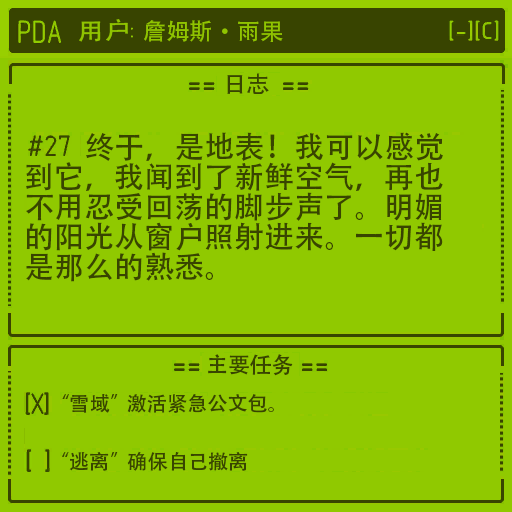
<style>
.page{position:relative;width:512px;height:512px;background:#90c900}
.page>*{position:absolute;margin:0}
.t1{font:23.4px "AdobeHeitiStd-Regular";color:#90c400;scale:1.15 1}
.t2{font:23.4px "AdobeHeitiStd-Regular";color:#90c400}
.t3{font:23.4px "AdobeHeitiStd-Regular";color:#384400}
.t4{font:30px/30px "AdobeHeitiStd-Regular";color:#384400}
.t5{font:21.8px "AdobeHeitiStd-Regular";color:#384400}
.t6{font:20.1px "AdobeHeitiStd-Regular";color:#384400}
</style>
<div class="page">
<p class="t1" style="left:79px;top:19px;width:49px;height:23px;rotate:-1deg">用户</p>
<p class="t2" style="left:144px;top:20px;width:139px;height:22px">詹姆斯·雨果</p>
<p class="t3" style="left:227px;top:73px;width:42px;height:21px">日志</p>
<p class="t4" style="left:26px;top:132px;width:417px;height:150px">终于，是地表！我可以感觉<br>到它，我闻到了新鲜空气，再也<br>不用忍受回荡的脚步声了。明媚<br>的阳光从窗户照射进来。一切都<br>是那么的熟悉。</p>
<p class="t5" style="left:208px;top:354px;width:85px;height:22px">主要任务</p>
<p class="t6" style="left:62px;top:394px;width:56px;height:19px">“雪域”</p>
<p class="t6" style="left:127px;top:394px;width:147px;height:19px">激活紧急公文包。</p>
<p class="t6" style="left:62px;top:452px;width:56px;height:19px">“逃离”</p>
<p class="t6" style="left:127px;top:451px;width:121px;height:20px">确保自己撤离</p>
</div>
